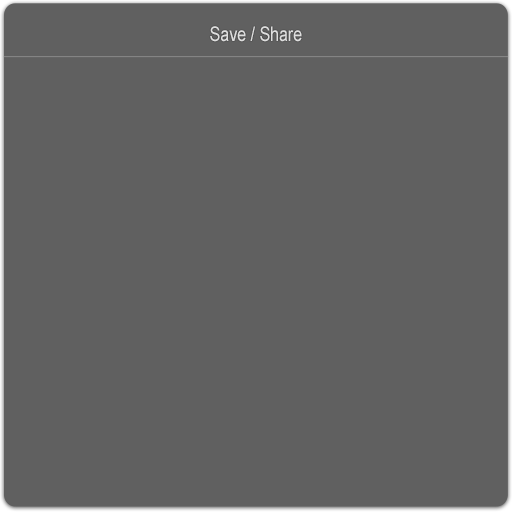
<style>
.page{position:relative;width:512px;height:512px;background:#606060}
.page>*{position:absolute;margin:0}
.t1{font:20px "ArialMT";color:#dedede;scale:0.8 1}
</style>
<div class="page">
<p class="t1" style="left:210px;top:26px;width:92px;height:16px">Save / Share</p>
</div>
